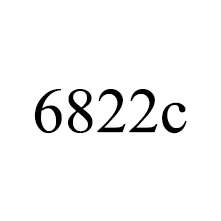
<style>
.page{position:relative;width:221px;height:221px;background:#ffffff}
.page>*{position:absolute;margin:0}
.t1{font:63.9px "TimesNewRomanPSMT";color:#000000}
</style>
<div class="page">
<p class="t1" style="left:34px;top:89px;width:153px;height:45px">6822с</p>
</div>
